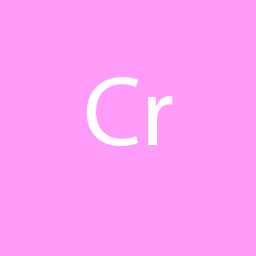
<style>
.page{position:relative;width:256px;height:256px;background:#ff9bf9}
.page>*{position:absolute;margin:0}
.t1{font:100px "MyriadPro-Regular";color:#ffffff}
</style>
<div class="page">
<p class="t1" style="left:86px;top:77px;width:87px;height:69px">Cr</p>
</div>
